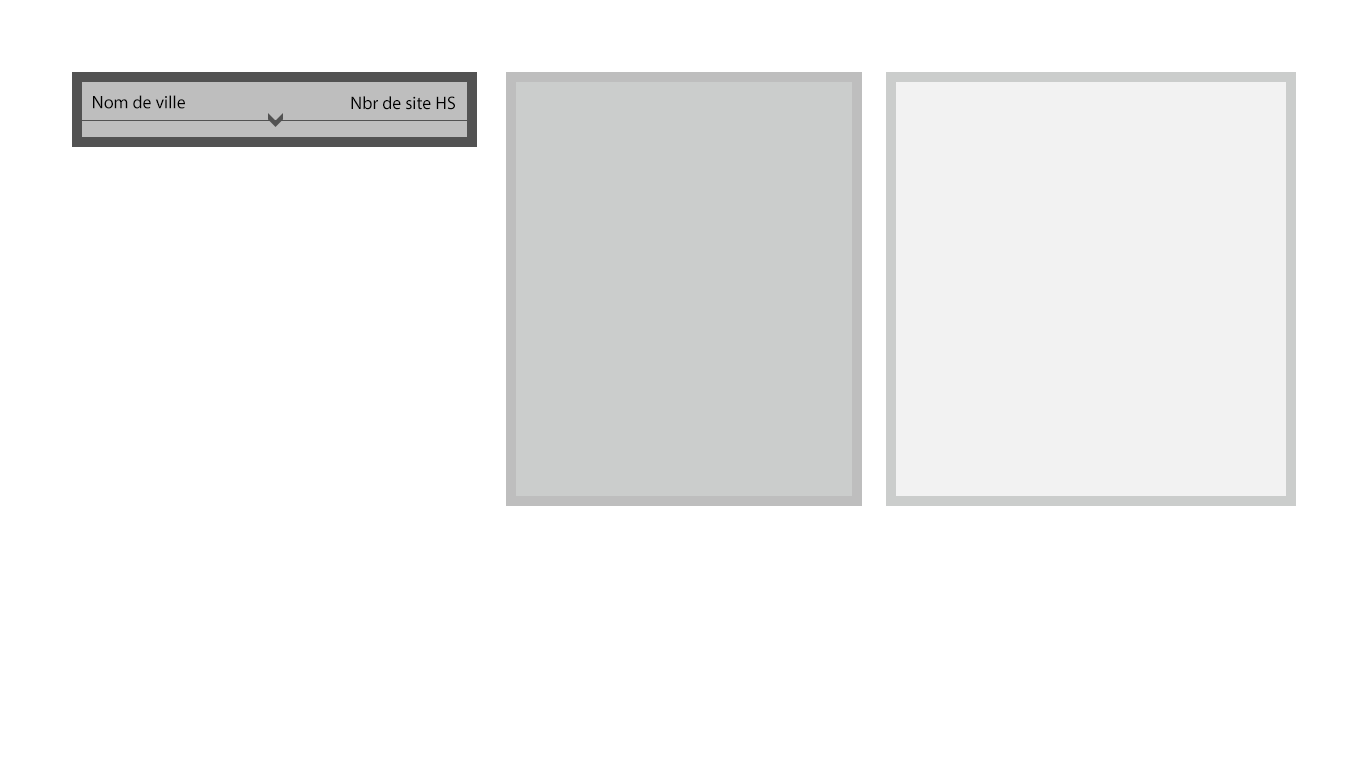
<style>
.page{position:relative;width:1366px;height:768px;background:#ffffff}
.page>*{position:absolute;margin:0}
.t1{font:18px "MyriadPro-Regular";color:#000000}
</style>
<div class="page">
<p class="t1" style="left:93px;top:95px;width:92px;height:14px">Nom de ville</p>
<p class="t1" style="left:351px;top:96px;width:104px;height:14px">Nbr de site HS</p>
</div>
